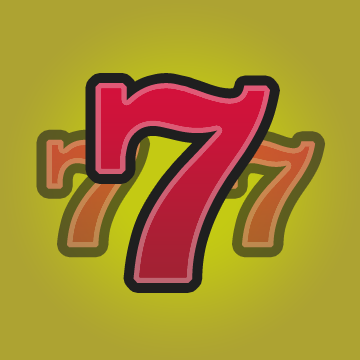
<style>
.page{position:relative;width:360px;height:360px;background:#ada332}
.page>*{position:absolute;margin:0}
.t1{font:280px "Clarendon-Bold";font-weight:bold}
.t2{font:150px "Clarendon-Bold";font-weight:bold}
</style>
<div class="page">
<p class="t1" style="left:95px;top:83px;width:175px;height:200px">7</p>
<p class="t2" style="left:46px;top:139px;width:95px;height:109px">7</p>
<p class="t2" style="left:221px;top:139px;width:95px;height:109px">7</p>
</div>
